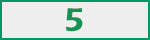
<style>
.page{position:relative;width:150px;height:40px;background:#eeeeee}
.page>*{position:absolute;margin:0}
.t1{font:33.3px "ErasITC-Demi";color:#169351}
</style>
<div class="page">
<p class="t1" style="left:66px;top:8px;width:17px;height:24px">5</p>
</div>
